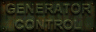
<style>
.page{position:relative;width:96px;height:32px}
.page>*{position:absolute;margin:0}
.t1{font:13px/16px "Arial-BoldMT";color:#33361f;font-weight:bold}
</style>
<div class="page">
<p class="t1" style="left:5px;top:3px;width:86px;height:27px;text-align:center">GENERATOR<br>CONTROL</p>
</div>
